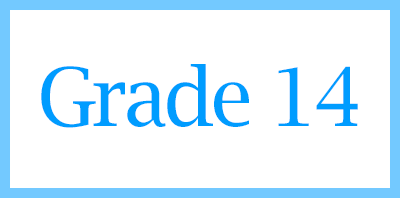
<style>
.page{position:relative;width:400px;height:198px;background:#ffffff}
.page>*{position:absolute;margin:0}
.t1{font:80.6px "LucidaBright";letter-spacing:-0.05em;color:#009cff}
</style>
<div class="page">
<p class="t1" style="left:41px;top:64px;width:317px;height:64px">Grade 14</p>
</div>
